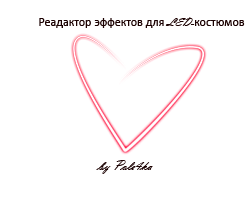
<style>
.page{position:relative;width:250px;height:214px;background:#ffffff}
.page>*{position:absolute;margin:0}
.t1{font:12px "Calibri";color:#1b0101}
.t2{font:12px "VladimirScript";color:#1b0101}
.t3{font:14px "VladimirScript";color:#1b0101}
</style>
<div class="page">
<p class="t1" style="left:39px;top:17px;width:206px;height:11px">Реадактор эффектов для<span class="t2"> LED-</span>костюмов</p>
<p class="t3" style="left:96px;top:160px;width:57px;height:14px">by Pole4ka</p>
</div>
